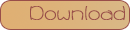
<style>
.page{position:relative;width:130px;height:30px}
.page>*{position:absolute;margin:0}
.t1{font:18px "DFYuanYuan-W2-HKP-BF";color:#994e49;font-weight:bold}
</style>
<div class="page">
<p class="t1" style="left:30px;top:6px;width:95px;height:14px">Download</p>
</div>
